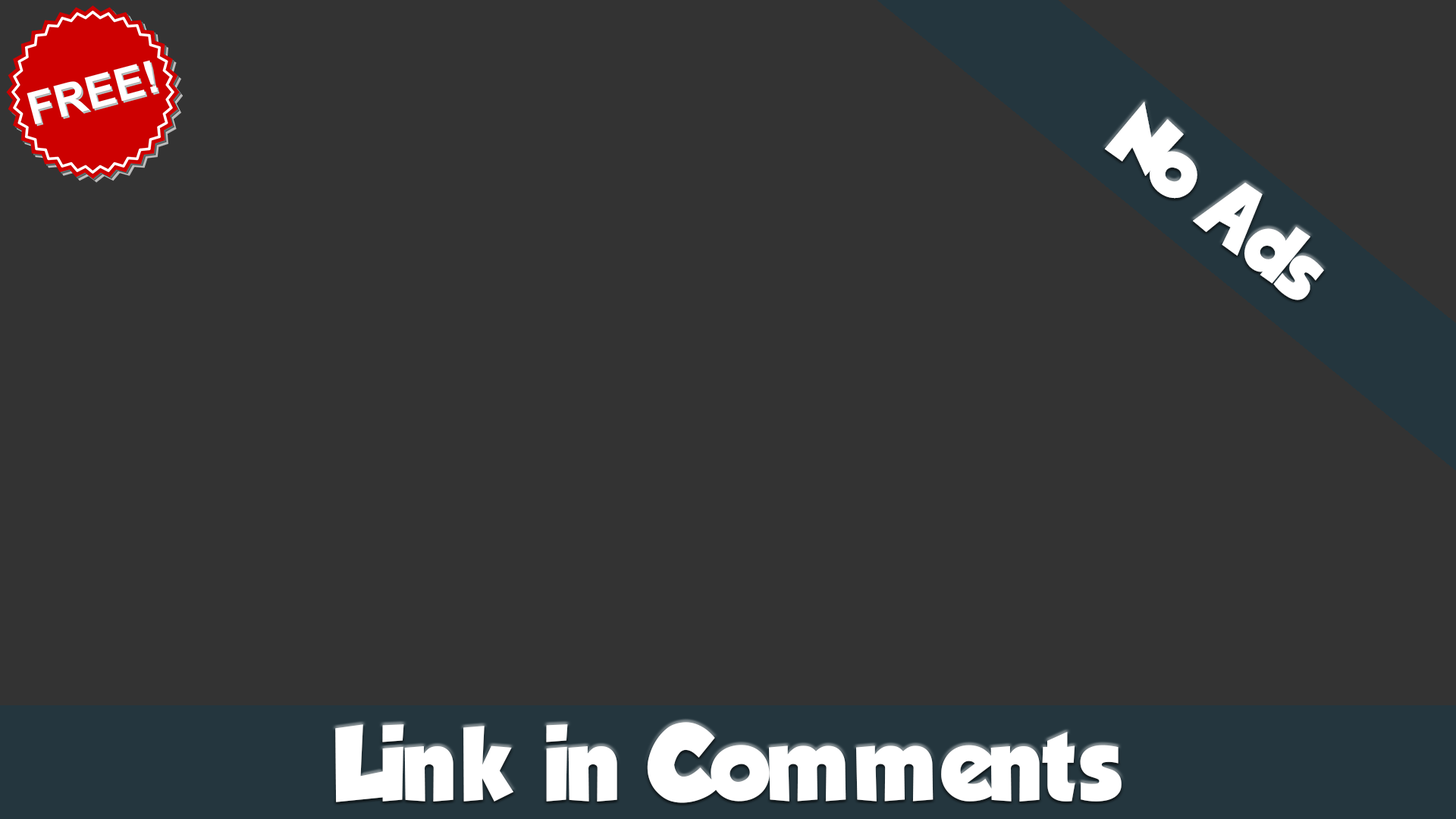
<style>
.page{position:relative;width:1456px;height:819px;background:#333333}
.page>*{position:absolute;margin:0}
.t1{font:91.8px "TadeoFont-Bold";color:#ffffff}
.t2{font:113.7px "TadeoFont-Bold";color:#ffffff}
</style>
<div class="page">
<p class="t1" style="left:1104px;top:102px;width:220px;height:198px;rotate:39deg">No Ads</p>
<p class="t2" style="left:335px;top:722px;width:787px;height:81px">Link in Comments</p>
</div>
